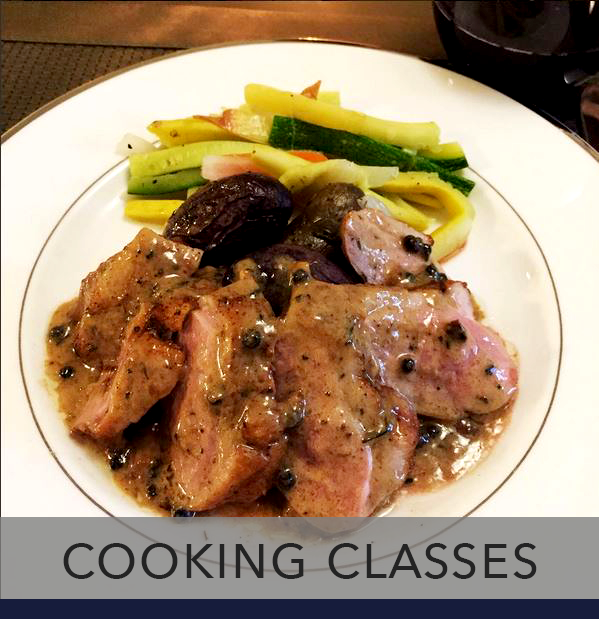
<style>
.page{position:relative;width:599px;height:619px}
.page>*{position:absolute;margin:0}
.t1{font:64px "AvenirNext-Regular";color:#232323;font-variant:small-caps}
</style>
<div class="page">
<p class="t1" style="left:63px;top:543px;width:474px;height:36px">cooking classes</p>
</div>
